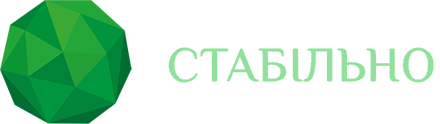
<style>
.page{position:relative;width:440px;height:124px;background:#ffffff}
.page>*{position:absolute;margin:0}
.t1{font:48.5px "Philosopher-Regular";letter-spacing:0.023em;color:#8fe19b}
</style>
<div class="page">
<p class="t1" style="left:169px;top:48px;width:265px;height:34px">СТАБІЛЬНО</p>
</div>
